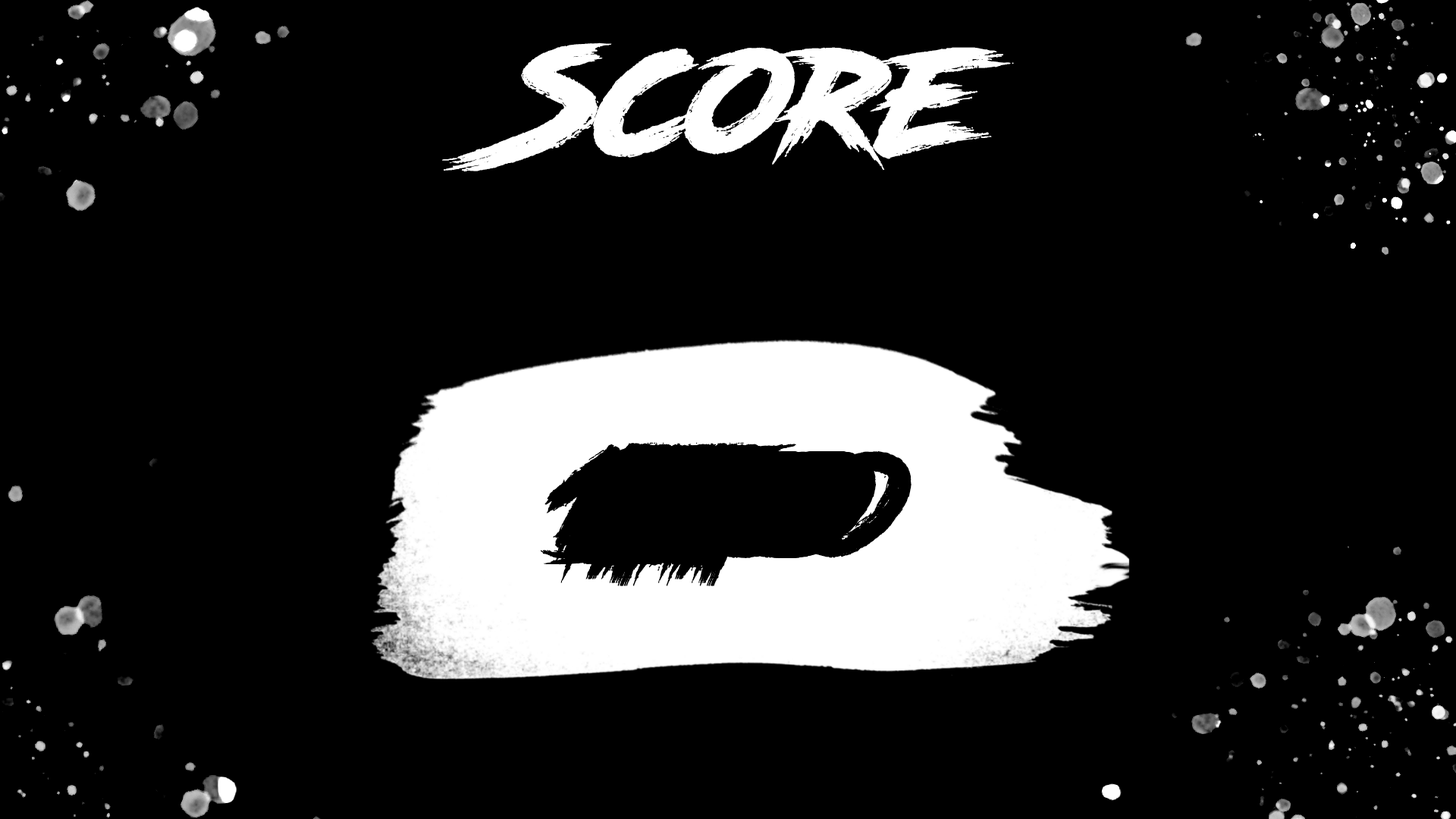
<style>
.page{position:relative;width:1456px;height:819px;background:#000000}
.page>*{position:absolute;margin:0}
.t1{font:151.7px "RoadRage";color:#ffffff}
.t2{font:151.7px "RoadRage";color:#000000}
</style>
<div class="page">
<p class="t1" style="left:442px;top:42px;width:572px;height:130px">Score</p>
<p class="t2" style="left:541px;top:444px;width:329px;height:116px">5oo</p>
<p class="t2" style="left:542px;top:444px;width:326px;height:120px">52o</p>
<p class="t2" style="left:543px;top:447px;width:331px;height:117px">3oo</p>
<p class="t2" style="left:543px;top:444px;width:324px;height:142px">54o</p>
<p class="t2" style="left:544px;top:444px;width:323px;height:118px">56o</p>
<p class="t2" style="left:544px;top:442px;width:322px;height:124px">58o</p>
<p class="t2" style="left:544px;top:444px;width:368px;height:139px">1ooo</p>
<p class="t2" style="left:545px;top:446px;width:326px;height:118px">32o</p>
<p class="t2" style="left:545px;top:444px;width:320px;height:120px">53o</p>
<p class="t2" style="left:546px;top:444px;width:325px;height:142px">34o</p>
<p class="t2" style="left:547px;top:442px;width:323px;height:124px">38o</p>
<p class="t2" style="left:547px;top:444px;width:317px;height:132px">57o</p>
<p class="t2" style="left:547px;top:444px;width:316px;height:135px">59o</p>
<p class="t2" style="left:550px;top:445px;width:318px;height:131px">37o</p>
<p class="t2" style="left:550px;top:447px;width:317px;height:132px">39o</p>
<p class="t2" style="left:556px;top:444px;width:299px;height:139px">51o</p>
<p class="t2" style="left:556px;top:444px;width:316px;height:142px">64o</p>
<p class="t2" style="left:557px;top:442px;width:314px;height:124px">68o</p>
<p class="t2" style="left:559px;top:444px;width:299px;height:139px">31o</p>
<p class="t2" style="left:560px;top:446px;width:308px;height:133px">69o</p>
<p class="t2" style="left:567px;top:444px;width:307px;height:142px">24o</p>
<p class="t2" style="left:568px;top:442px;width:305px;height:124px">28o</p>
<p class="t2" style="left:568px;top:444px;width:292px;height:139px">61o</p>
<p class="t2" style="left:570px;top:442px;width:304px;height:124px">8oo</p>
<p class="t2" style="left:571px;top:446px;width:299px;height:133px">29o</p>
<p class="t2" style="left:572px;top:442px;width:301px;height:124px">82o</p>
<p class="t2" style="left:573px;top:442px;width:299px;height:144px">84o</p>
<p class="t2" style="left:573px;top:442px;width:298px;height:124px">88o</p>
<p class="t2" style="left:574px;top:444px;width:301px;height:142px">4oo</p>
<p class="t2" style="left:576px;top:444px;width:298px;height:142px">42o</p>
<p class="t2" style="left:576px;top:442px;width:292px;height:134px">87o</p>
<p class="t2" style="left:576px;top:442px;width:292px;height:137px">89o</p>
<p class="t2" style="left:577px;top:444px;width:296px;height:142px">44o</p>
<p class="t2" style="left:577px;top:444px;width:295px;height:142px">46o</p>
<p class="t2" style="left:578px;top:442px;width:294px;height:144px">48o</p>
<p class="t2" style="left:579px;top:444px;width:292px;height:142px">43o</p>
<p class="t2" style="left:579px;top:444px;width:282px;height:139px">21o</p>
<p class="t2" style="left:580px;top:444px;width:289px;height:142px">47o</p>
<p class="t2" style="left:581px;top:444px;width:288px;height:142px">49o</p>
<p class="t2" style="left:581px;top:447px;width:290px;height:132px">9oo</p>
<p class="t2" style="left:582px;top:444px;width:285px;height:142px">45o</p>
<p class="t2" style="left:583px;top:446px;width:287px;height:133px">92o</p>
<p class="t2" style="left:584px;top:444px;width:285px;height:142px">94o</p>
<p class="t2" style="left:584px;top:446px;width:284px;height:133px">96o</p>
<p class="t2" style="left:585px;top:442px;width:283px;height:137px">98o</p>
<p class="t2" style="left:585px;top:444px;width:284px;height:142px">74o</p>
<p class="t2" style="left:585px;top:442px;width:274px;height:141px">81o</p>
<p class="t2" style="left:585px;top:447px;width:282px;height:132px">93o</p>
<p class="t2" style="left:586px;top:442px;width:282px;height:134px">78o</p>
<p class="t2" style="left:588px;top:445px;width:277px;height:134px">97o</p>
<p class="t2" style="left:588px;top:447px;width:277px;height:132px">99o</p>
<p class="t2" style="left:589px;top:444px;width:271px;height:142px">41o</p>
<p class="t2" style="left:589px;top:445px;width:276px;height:134px">79o</p>
<p class="t2" style="left:589px;top:444px;width:274px;height:135px">95o</p>
<p class="t2" style="left:593px;top:444px;width:270px;height:139px">1oo</p>
<p class="t2" style="left:595px;top:444px;width:266px;height:139px">12o</p>
<p class="t2" style="left:596px;top:444px;width:264px;height:142px">14o</p>
<p class="t2" style="left:596px;top:444px;width:264px;height:139px">16o</p>
<p class="t2" style="left:596px;top:444px;width:260px;height:139px">91o</p>
<p class="t2" style="left:597px;top:442px;width:262px;height:141px">18o</p>
<p class="t2" style="left:598px;top:444px;width:260px;height:139px">13o</p>
<p class="t2" style="left:598px;top:444px;width:259px;height:139px">71o</p>
<p class="t2" style="left:600px;top:444px;width:257px;height:139px">17o</p>
<p class="t2" style="left:600px;top:444px;width:256px;height:139px">19o</p>
<p class="t2" style="left:601px;top:444px;width:254px;height:139px">15o</p>
<p class="t2" style="left:608px;top:444px;width:240px;height:139px">11o</p>
<p class="t2" style="left:623px;top:444px;width:204px;height:142px">4o</p>
<p class="t2" style="left:642px;top:444px;width:172px;height:139px">1o</p>
</div>
